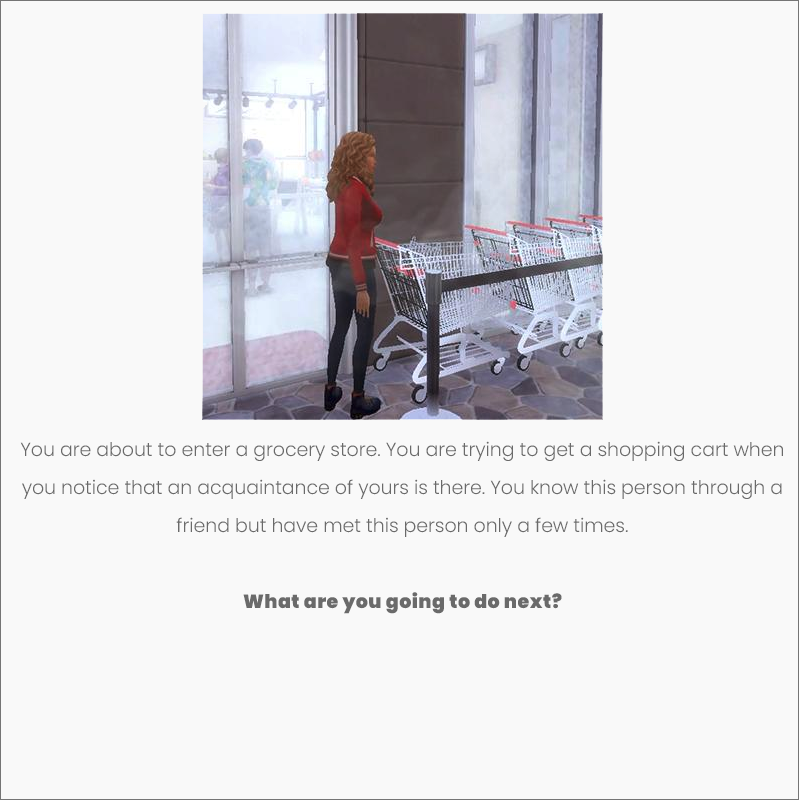
<style>
.page{position:relative;width:799px;height:800px;background:#f9f9f9}
.page>*{position:absolute;margin:0}
.t1{font:19px/38px "Poppins-Light";letter-spacing:-0.005em;color:#6a6a6a}
.t2{font:19px/38px "Poppins-Black";letter-spacing:0.025em;color:#6a6a6a}
</style>
<div class="page">
<p class="t1" style="left:20px;top:441px;width:763px;height:173px;text-align:center">You are about to enter a grocery store. You are trying to get a shopping cart when you notice that an acquaintance of yours is there. You know this person through a friend but have met this person only a few times.<br><br><span class="t2">What are you going to do next?</span></p>
</div>
